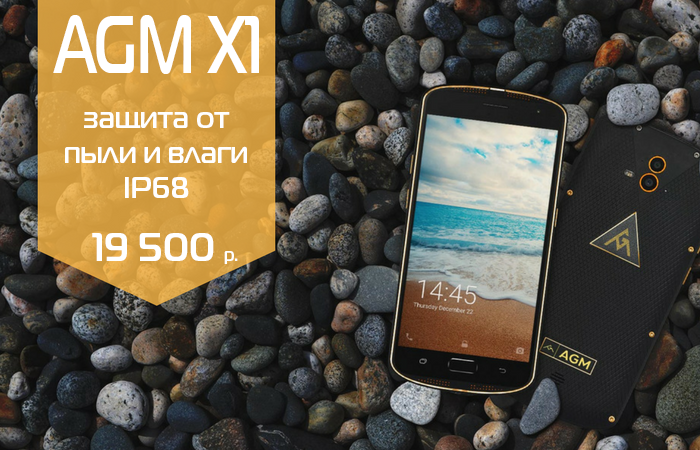
<style>
.page{position:relative;width:700px;height:450px}
.page>*{position:absolute;margin:0}
.t1{font:82.4px "MagistralC-Bold";color:#ffffff;scale:0.71 1}
.t2{font:29.3px "MagistralC-Bold";color:#ffffff}
.t3{font:40px "MagistralC-Bold";color:#ffffff}
.t4{font:18.7px "MagistralC-Bold";color:#ffffff}
</style>
<div class="page">
<p class="t1" style="left:53px;top:15px;width:206px;height:59px">AGM X1</p>
<p class="t2" style="left:65px;top:111px;width:182px;height:87px;text-align:center">защита от<br>пыли и влаги<br>IP68</p>
<p class="t3" style="left:92px;top:233px;width:146px;height:31px">19 500 <span class="t4">р.</span></p>
</div>
